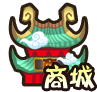
<style>
.page{position:relative;width:97px;height:92px;background:#ffffff}
.page>*{position:absolute;margin:0}
.t1{font:26px "DFPBuDingW12"}
</style>
<div class="page">
<p class="t1" style="left:44px;top:64px;width:51px;height:25px">商城</p>
</div>
